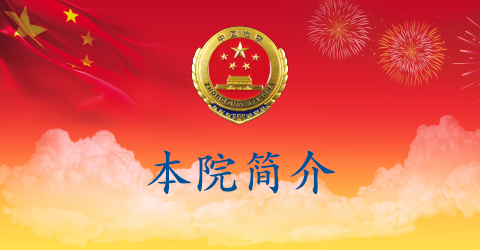
<style>
.page{position:relative;width:480px;height:250px}
.page>*{position:absolute;margin:0}
.t1{font:48px "STKaiti-SC-Bold";color:#005297}
</style>
<div class="page">
<p class="t1" style="left:147px;top:150px;width:189px;height:45px">本院简介</p>
</div>
